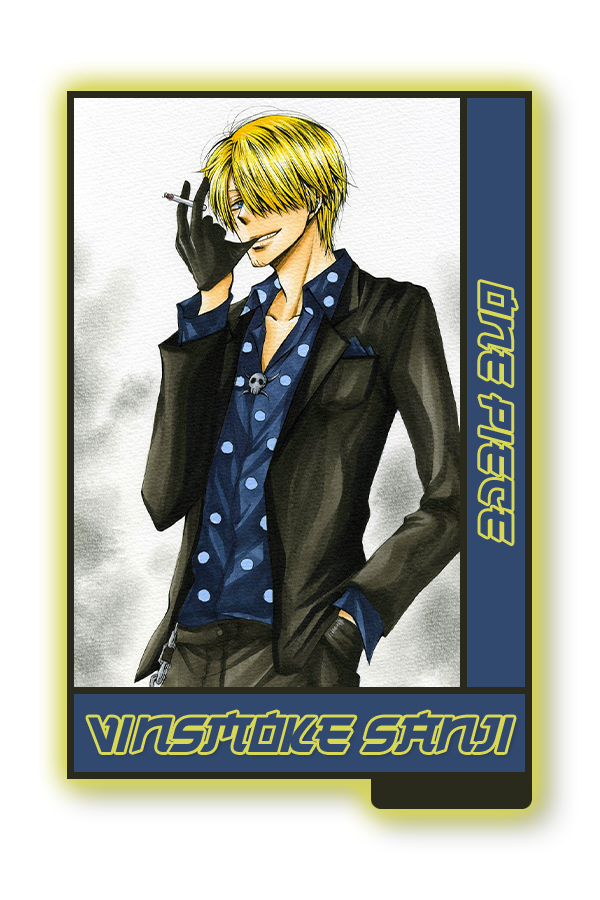
<style>
.page{position:relative;width:600px;height:900px;background:#ffffff}
.page>*{position:absolute;margin:0}
.t1{font:48.8px "Japanese2020-Italic";color:#2c436f}
.t2{font:54.2px "Japanese2020-Italic";color:#2c436f}
</style>
<div class="page">
<p class="t1" style="left:480px;top:282px;width:36px;height:262px;rotate:90deg">ONE PIECE</p>
<p class="t2" style="left:88px;top:712px;width:426px;height:40px">VINSMOKE SANJI</p>
</div>
